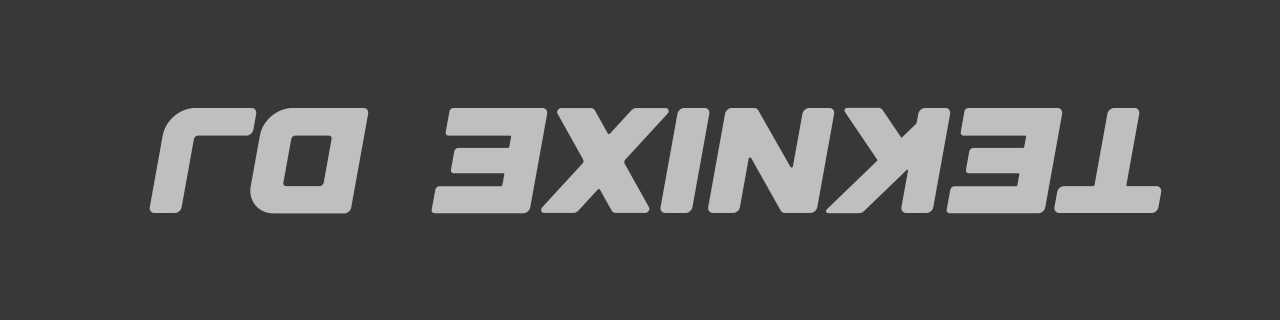
<style>
.page{position:relative;width:1280px;height:320px;background:#383838}
.page>*{position:absolute;margin:0}
.t1{font:150px "DesignerRegular";color:#bfbfbf}
</style>
<div class="page">
<p class="t1" style="left:149px;top:107px;width:1013px;height:107px;rotate:180deg">TEKNIXE DJ</p>
</div>
